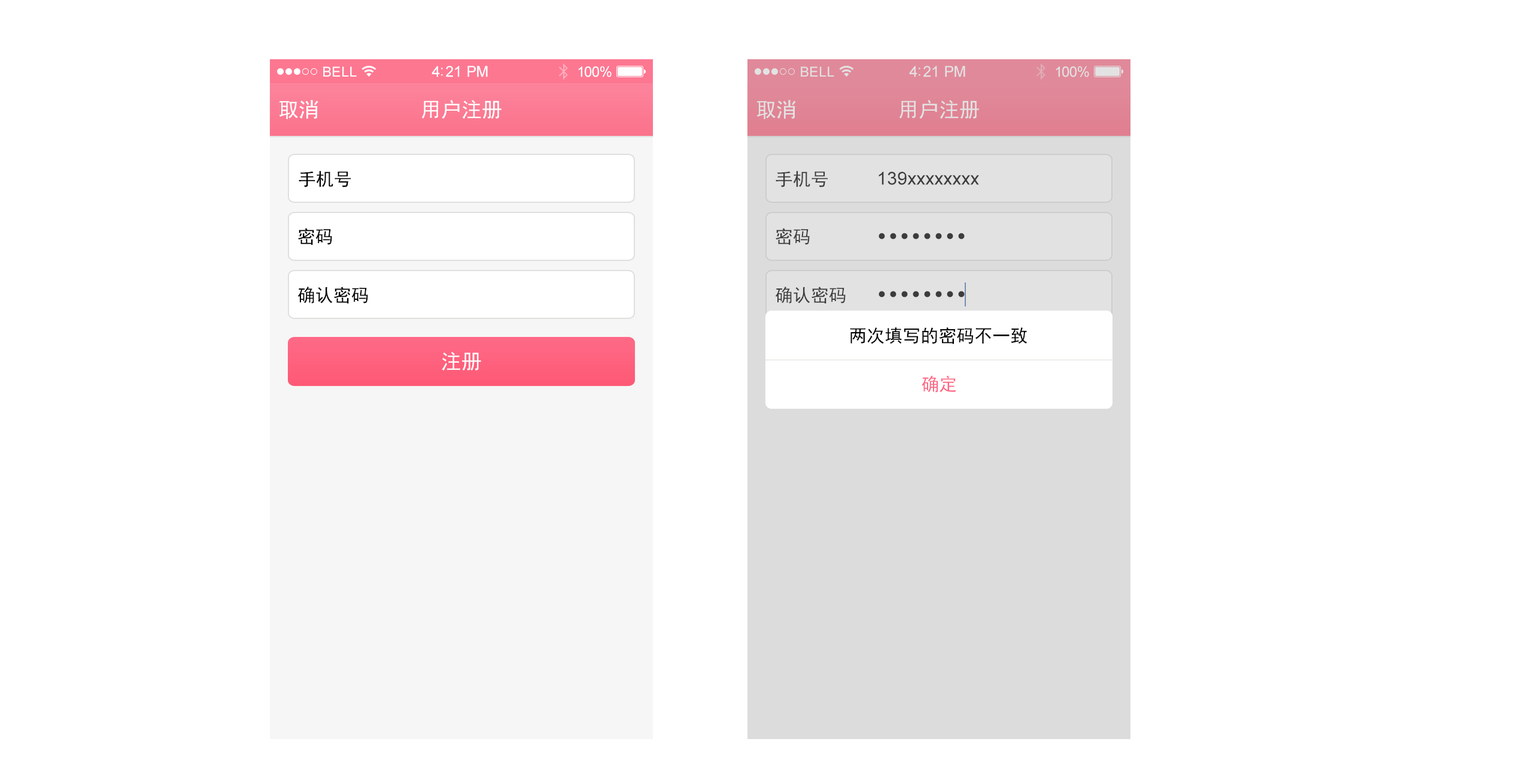
<style>
.page{position:relative;width:1532px;height:778px;background:#ffffff}
.page>*{position:absolute;margin:0}
.t1{font:15px "ArialMT";letter-spacing:-0.02em;color:#ffffff}
.t2{font:14.4px "ArialMT";letter-spacing:-0.02em;color:#ffffff}
.t3{font:15px "ArialMT";letter-spacing:-0.02em;color:#e2e2e2}
.t4{font:14.4px "ArialMT";letter-spacing:-0.02em;color:#e2e2e2}
.t5{font:13.8px "ArialMT";letter-spacing:0.02em;color:#ffffff}
.t6{font:13.8px "ArialMT";letter-spacing:0.02em;color:#e2e2e2}
.t7{font:20.4px "SimHei";color:#ffffff}
.t8{font:20.4px "SimHei";color:#e2e2e2}
.t9{font:18px "SimHei";color:#000000}
.t10{font:18px "SimHei";color:#3c3c3c}
.t11{font:18px "ArialMT";color:#3c3c3c}
.t12{font:47.9px "MicrosoftYaHei";color:#3c3c3c}
.t13{font:18px "SimHei";color:#fe6986}
</style>
<div class="page">
<p class="t1" style="left:432px;top:66px;width:56px;height:11px">4:21 PM</p>
<p class="t2" style="left:578px;top:66px;width:34px;height:11px">100%</p>
<p class="t3" style="left:909px;top:66px;width:57px;height:11px">4:21 PM</p>
<p class="t4" style="left:1056px;top:66px;width:33px;height:11px">100%</p>
<p class="t5" style="left:323px;top:66px;width:34px;height:11px">BELL</p>
<p class="t6" style="left:801px;top:66px;width:33px;height:11px">BELL</p>
<p class="t7" style="left:280px;top:100px;width:38px;height:19px">取消</p>
<p class="t7" style="left:422px;top:100px;width:80px;height:19px">用户注册</p>
<p class="t8" style="left:757px;top:100px;width:39px;height:19px">取消</p>
<p class="t8" style="left:900px;top:100px;width:79px;height:19px">用户注册</p>
<p class="t9" style="left:299px;top:171px;width:52px;height:16px">手机号</p>
<p class="t10" style="left:776px;top:171px;width:52px;height:16px">手机号</p>
<p class="t11" style="left:879px;top:172px;width:100px;height:13px">139xxxxxxxx</p>
<p class="t9" style="left:298px;top:228px;width:34px;height:17px">密码</p>
<p class="t10" style="left:776px;top:228px;width:34px;height:17px">密码</p>
<p class="t12" style="left:879px;top:233px;width:86px;height:6px">········</p>
<p class="t9" style="left:297px;top:287px;width:71px;height:16px">确认密码</p>
<p class="t10" style="left:775px;top:287px;width:71px;height:16px">确认密码</p>
<p class="t12" style="left:879px;top:291px;width:86px;height:6px">········</p>
<p class="t9" style="left:850px;top:327px;width:178px;height:17px">两次填写的密码不一致</p>
<p class="t7" style="left:442px;top:352px;width:39px;height:19px">注册</p>
<p class="t13" style="left:922px;top:375px;width:35px;height:18px">确定</p>
</div>
